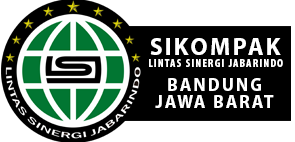
<style>
.page{position:relative;width:295px;height:142px;background:#000000}
.page>*{position:absolute;margin:0}
.t1{font:24px "MyriadPro-Bold";letter-spacing:0.1em;color:#ffffff;text-transform:uppercase}
.t2{font:11.6px "MyriadPro-BoldCond";letter-spacing:0.1em;color:#ffffff;text-transform:uppercase}
.t3{font:18px "MyriadPro-Bold";letter-spacing:0.1em;color:#ffffff;text-transform:uppercase}
</style>
<div class="page">
<p class="t1" style="left:150px;top:38px;width:131px;height:17px">SIKOMPAK</p>
<p class="t2" style="left:149px;top:59px;width:134px;height:8px">lintas sinergi jabarindo</p>
<p class="t3" style="left:168px;top:78px;width:93px;height:13px">BANDUNG</p>
<p class="t3" style="left:155px;top:95px;width:119px;height:13px">JAWA BARAT</p>
</div>
